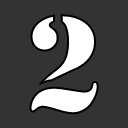
<style>
.page{position:relative;width:128px;height:128px;background:#333333}
.page>*{position:absolute;margin:0}
.t1{font:128px "StencilStd";color:#ffffff}
</style>
<div class="page">
<p class="t1" style="left:29px;top:14px;width:70px;height:101px">2</p>
</div>
